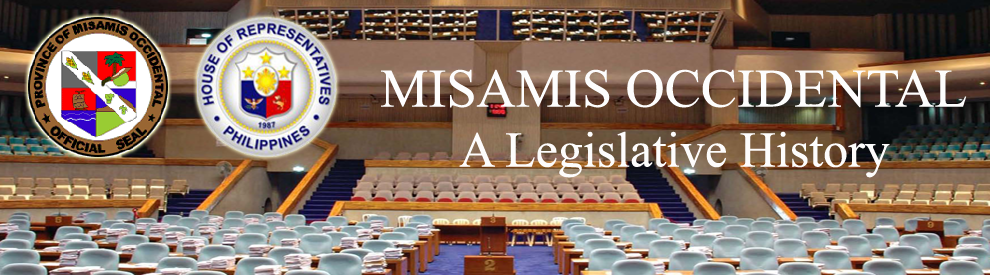
<style>
.page{position:relative;width:990px;height:275px}
.page>*{position:absolute;margin:0}
.t1{font:50px "TimesNewRomanPSMT";color:#fdfcfc}
.t2{font:54.2px "TimesNewRomanPSMT";color:#fdfdfd}
</style>
<div class="page">
<p class="t1" style="left:381px;top:69px;width:586px;height:109px;text-align:center"><span class="t2">MISAMIS OCCIDENTAL<br></span>A Legislative History</p>
</div>
